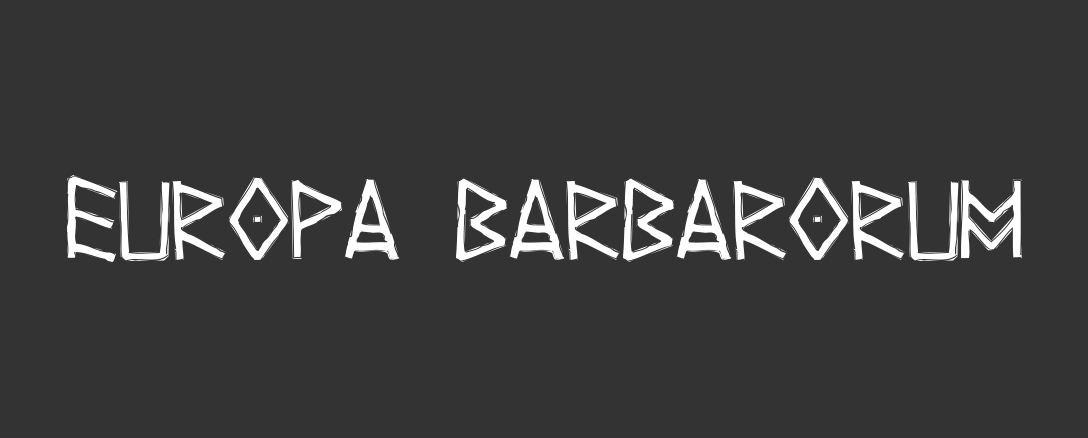
<style>
.page{position:relative;width:1088px;height:438px;background:#333333}
.page>*{position:absolute;margin:0}
.t1{font:108.3px "Yggdrasil";color:#ffffff}
</style>
<div class="page">
<p class="t1" style="left:67px;top:175px;width:955px;height:87px">EUROPA BARBARORUM</p>
</div>
